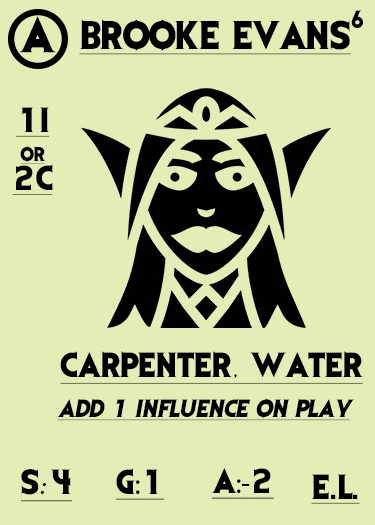
<style>
.page{position:relative;width:375px;height:525px;background:#e3edb5}
.page>*{position:absolute;margin:0}
.t1{font:41.7px "EvilDead";letter-spacing:-0.05em;color:#000000}
.t2{font:20.8px "EvilDead";letter-spacing:-0.05em;color:#000000}
.t3{font:33.3px "EvilDead";color:#000000;text-decoration:underline}
.t4{font:29.2px/29.2px "EvilDead";color:#000000;text-decoration:underline}
.t5{font:16.7px/29.2px "EvilDead";color:#000000;text-decoration:underline}
.t6{font:29.2px "EvilDead";color:#000000;text-decoration:underline}
.t7{font:29.2px "Fadli-Script";color:#000000;text-decoration:underline}
.t8{font:20.8px "EvilDead";color:#000000;font-style:italic;text-decoration:underline}
.t9{font:29.2px "MyriadPro-Regular";color:#000000;text-decoration:underline}
</style>
<div class="page">
<p class="t1" style="left:19px;top:16px;width:37px;height:37px">A</p>
<p class="t2" style="left:351px;top:10px;width:12px;height:18px">6</p>
<p class="t3" style="left:79px;top:19px;width:272px;height:36px">BROOKE EVANS</p>
<p class="t4" style="left:12px;top:107px;width:41px;height:88px;text-align:center">1I<br><span class="t5">or<br></span>2C</p>
<p class="t6" style="left:60px;top:351px;width:303px;height:33px">CARPENTER<span class="t7">,</span> WATER</p>
<p class="t8" style="left:57px;top:398px;width:298px;height:23px">Add 1 influence on play</p>
<p class="t6" style="left:21px;top:469px;width:52px;height:33px">S<span class="t7">:</span>4</p>
<p class="t6" style="left:116px;top:468px;width:49px;height:32px">G<span class="t9">:</span>1</p>
<p class="t9" style="left:211px;top:468px;width:63px;height:31px"><span class="t6">A</span>:-<span class="t6">2</span></p>
<p class="t6" style="left:311px;top:474px;width:49px;height:30px">E.L.</p>
</div>
